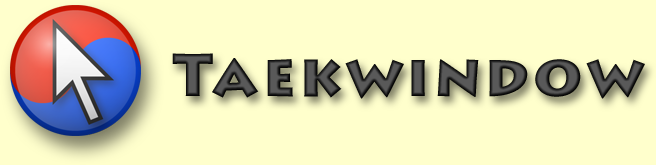
<style>
.page{position:relative;width:656px;height:165px;background:#ffffcc}
.page>*{position:absolute;margin:0}
.t1{font:60px "LithosPro-Black";letter-spacing:0.05em}
</style>
<div class="page">
<p class="t1" style="left:172px;top:53px;width:473px;height:46px">Taekwindow</p>
</div>
